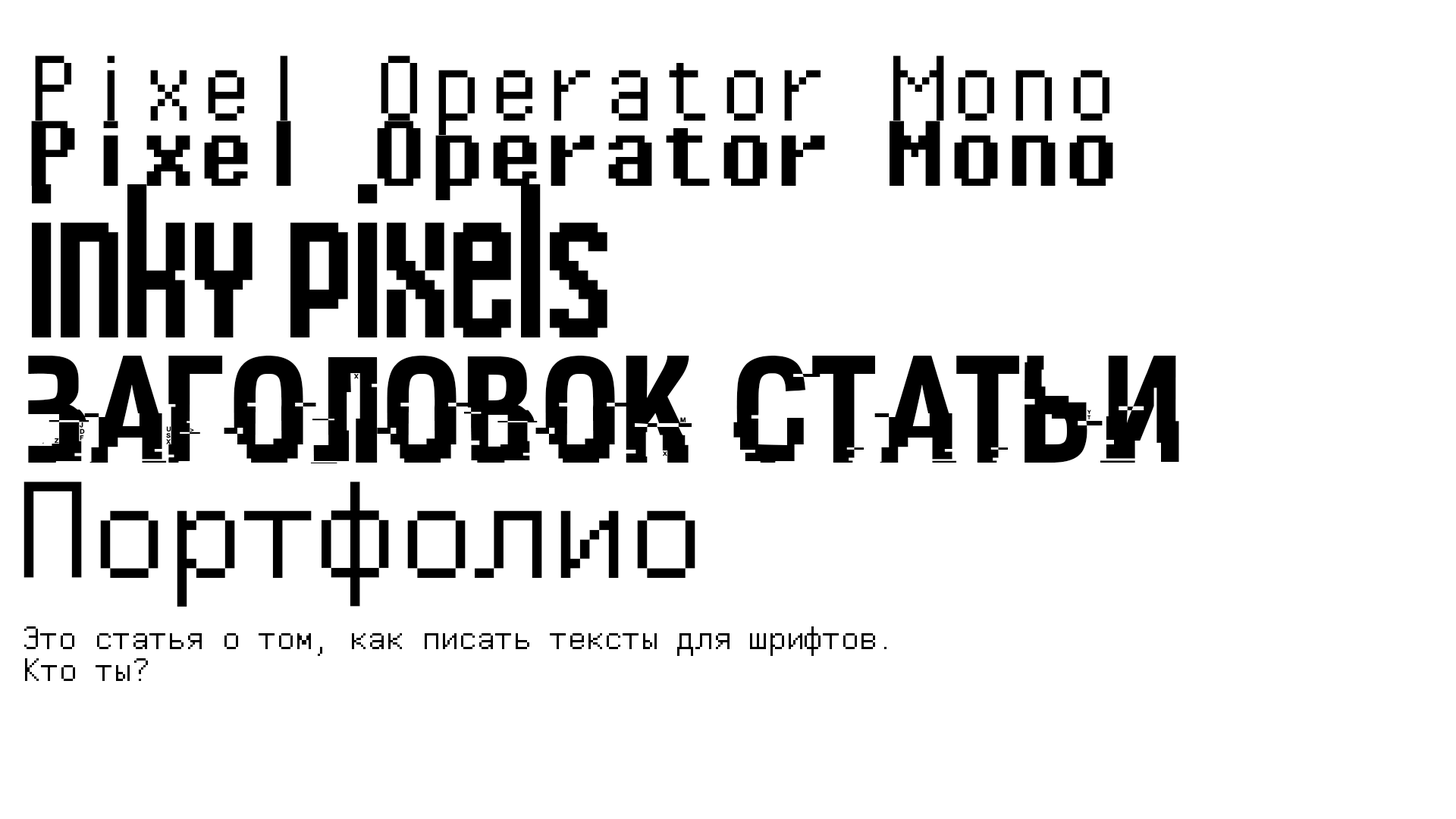
<style>
.page{position:relative;width:1456px;height:819px;background:#ffffff}
.page>*{position:absolute;margin:0}
.t1{font:115.3px "PixelOperatorMono";color:#000000}
.t2{font:115.4px "PixelOperatorMono-Bold";color:#000000}
.t3{font:153.4px "Inky-Thin-Pixels";color:#000000}
.t4{font:153.4px "HACKED";color:#000000}
.t5{font:153.4px "CustomFontttf16h2.0";color:#000000}
.t6{font:36.4px "CustomFontttf16h2.0";color:#000000}
</style>
<div class="page">
<p class="t1" style="left:35px;top:55px;width:1074px;height:80px">Pixel Operator Mono</p>
<p class="t2" style="left:31px;top:121px;width:1082px;height:79px">Pixel Operator Mono</p>
<p class="t3" style="left:32px;top:184px;width:575px;height:153px">inky pixels</p>
<p class="t4" style="left:28px;top:356px;width:1151px;height:107px">заголовок статьи</p>
<p class="t5" style="left:24px;top:482px;width:671px;height:125px">Портфолио</p>
<p class="t6" style="left:24px;top:626px;width:862px;height:30px">Это статья о том, как писать тексты для шрифтов.</p>
<p class="t6" style="left:25px;top:658px;width:123px;height:23px">Кто ты?</p>
</div>
